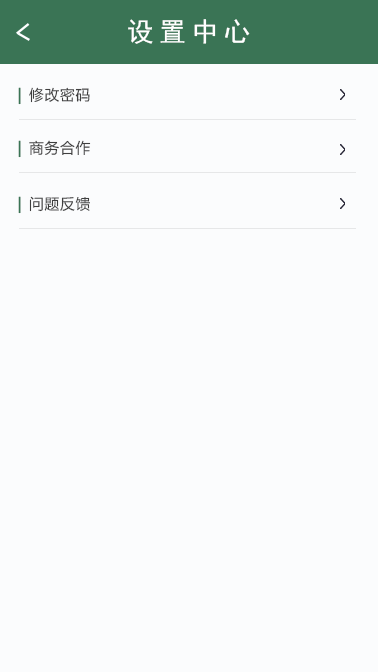
<style>
.page{position:relative;width:378px;height:672px;background:#fbfcfd}
.page>*{position:absolute;margin:0}
.t1{font:26.7px "SimHei";letter-spacing:0.2em;color:#ffffff}
.t2{font:14.7px "MicrosoftYaHei";letter-spacing:0.05em;color:#3f3f3f}
.t3{font:14.7px "MicrosoftYaHei";letter-spacing:0.1em;color:#3a7455;font-weight:bold}
</style>
<div class="page">
<p class="t1" style="left:128px;top:19px;width:122px;height:25px">设置中心</p>
<p class="t2" style="left:18px;top:87px;width:72px;height:18px"><span class="t3">| </span>修改密码</p>
<p class="t2" style="left:18px;top:140px;width:73px;height:18px"><span class="t3">| </span>商务合作</p>
<p class="t2" style="left:18px;top:196px;width:72px;height:18px"><span class="t3">| </span>问题反馈</p>
</div>
